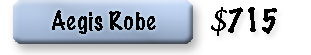
<style>
.page{position:relative;width:311px;height:55px;background:#ffffff}
.page>*{position:absolute;margin:0}
.t1{font:24px "MarkerFelt-Thin";color:#000000}
.t2{font:30px "MarkerFelt-Thin";color:#000000}
.t3{font:30px "LucidaHandwriting-Italic";color:#000000}
</style>
<div class="page">
<p class="t1" style="left:52px;top:10px;width:104px;height:24px">Aegis Robe</p>
<p class="t2" style="left:211px;top:7px;width:66px;height:29px"><span class="t3">$</span>715</p>
</div>
